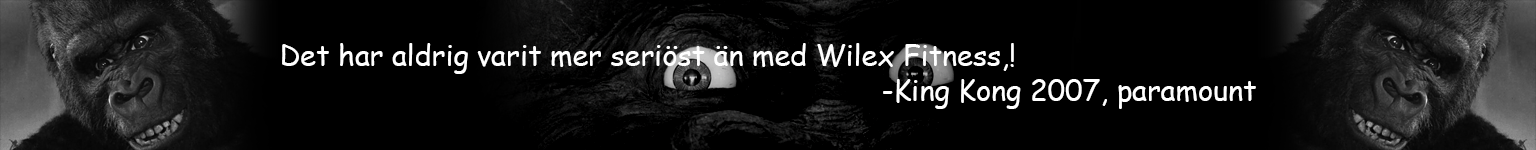
<style>
.page{position:relative;width:1536px;height:150px;background:#000000}
.page>*{position:absolute;margin:0}
.t1{font:28.8px "ComicSansMS";color:#ffffff}
</style>
<div class="page">
<p class="t1" style="left:282px;top:43px;width:974px;height:66px">Det har aldrig varit mer seriöst än med Wilex Fitness,!<br>                                                                      -King Kong 2007, paramount</p>
</div>
